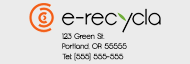
<style>
.page{position:relative;width:190px;height:64px;background:#ebebeb}
.page>*{position:absolute;margin:0}
.t1{font:7.5px "Opificio";color:#000000}
</style>
<div class="page">
<p class="t1" style="left:62px;top:33px;width:43px;height:6px">123 Green St.</p>
<p class="t1" style="left:62px;top:43px;width:65px;height:7px">Portland, OR 55555</p>
<p class="t1" style="left:62px;top:52px;width:62px;height:9px">Tel: (555) 555-555</p>
</div>
